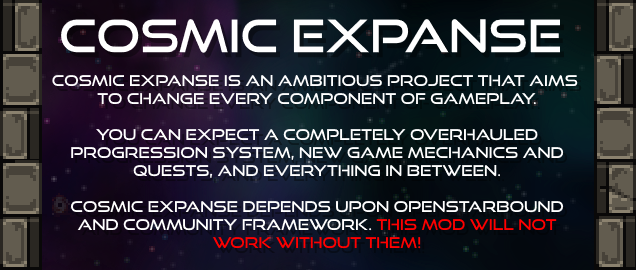
<style>
.page{position:relative;width:636px;height:270px}
.page>*{position:absolute;margin:0}
.t1{font:45px "GoodTimesRg-Regular";color:#ffffff}
.t2{font:15px "GoodTimesRg-Regular";color:#ffffff}
.t3{font:15px "GoodTimesRg-Regular";color:#ff0000}
</style>
<div class="page">
<p class="t1" style="left:61px;top:19px;width:499px;height:34px">Cosmic Expanse</p>
<p class="t2" style="left:52px;top:74px;width:526px;height:175px;text-align:center">Cosmic Expanse is an ambitious project that aims <br>to change every component of gameplay.<br><br>You can expect a completely overhauled<br>progression system, new game mechanics and<br>quests, and everything in between.<br><br>Cosmic expanse depends upon Openstarbound<br>and community framework. <span class="t3">this mod will not<br>work without them!</span></p>
</div>
